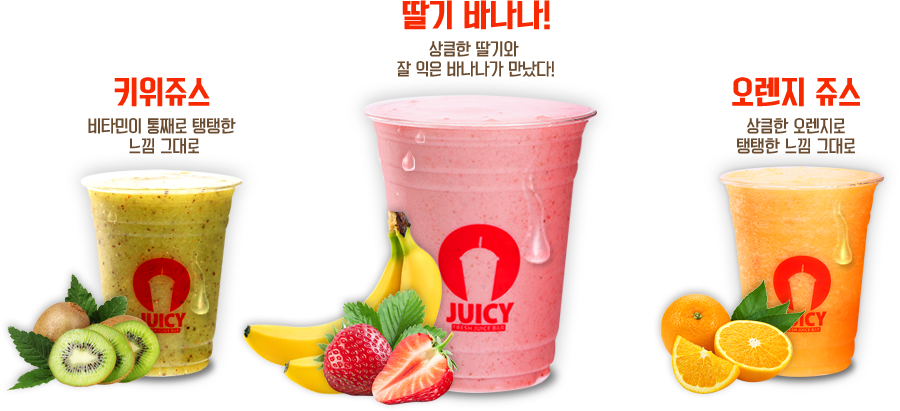
<style>
.page{position:relative;width:900px;height:411px;background:#ffffff}
.page>*{position:absolute;margin:0}
.t1{font:30px "KoreanYNMYT-B";letter-spacing:-0.025em;color:#f82900}
.t2{font:16px/20px "KoreanYNMYT-L";letter-spacing:-0.025em;color:#694b30}
</style>
<div class="page">
<p class="t1" style="left:402px;top:0px;width:148px;height:30px">딸기 바나나!</p>
<p class="t2" style="left:397px;top:41px;width:157px;height:36px;text-align:center">상큼한 딸기와 <br>잘 익은 바나나가 만났다!</p>
<p class="t1" style="left:114px;top:77px;width:96px;height:30px">키위쥬스</p>
<p class="t1" style="left:732px;top:77px;width:129px;height:30px">오렌지 쥬스</p>
<p class="t2" style="left:88px;top:118px;width:148px;height:36px;text-align:center">비타민이 통째로 탱탱한 <br>느낌 그대로</p>
<p class="t2" style="left:737px;top:118px;width:118px;height:36px;text-align:center">상큼한 오렌지로<br>탱탱한 느낌 그대로</p>
</div>
